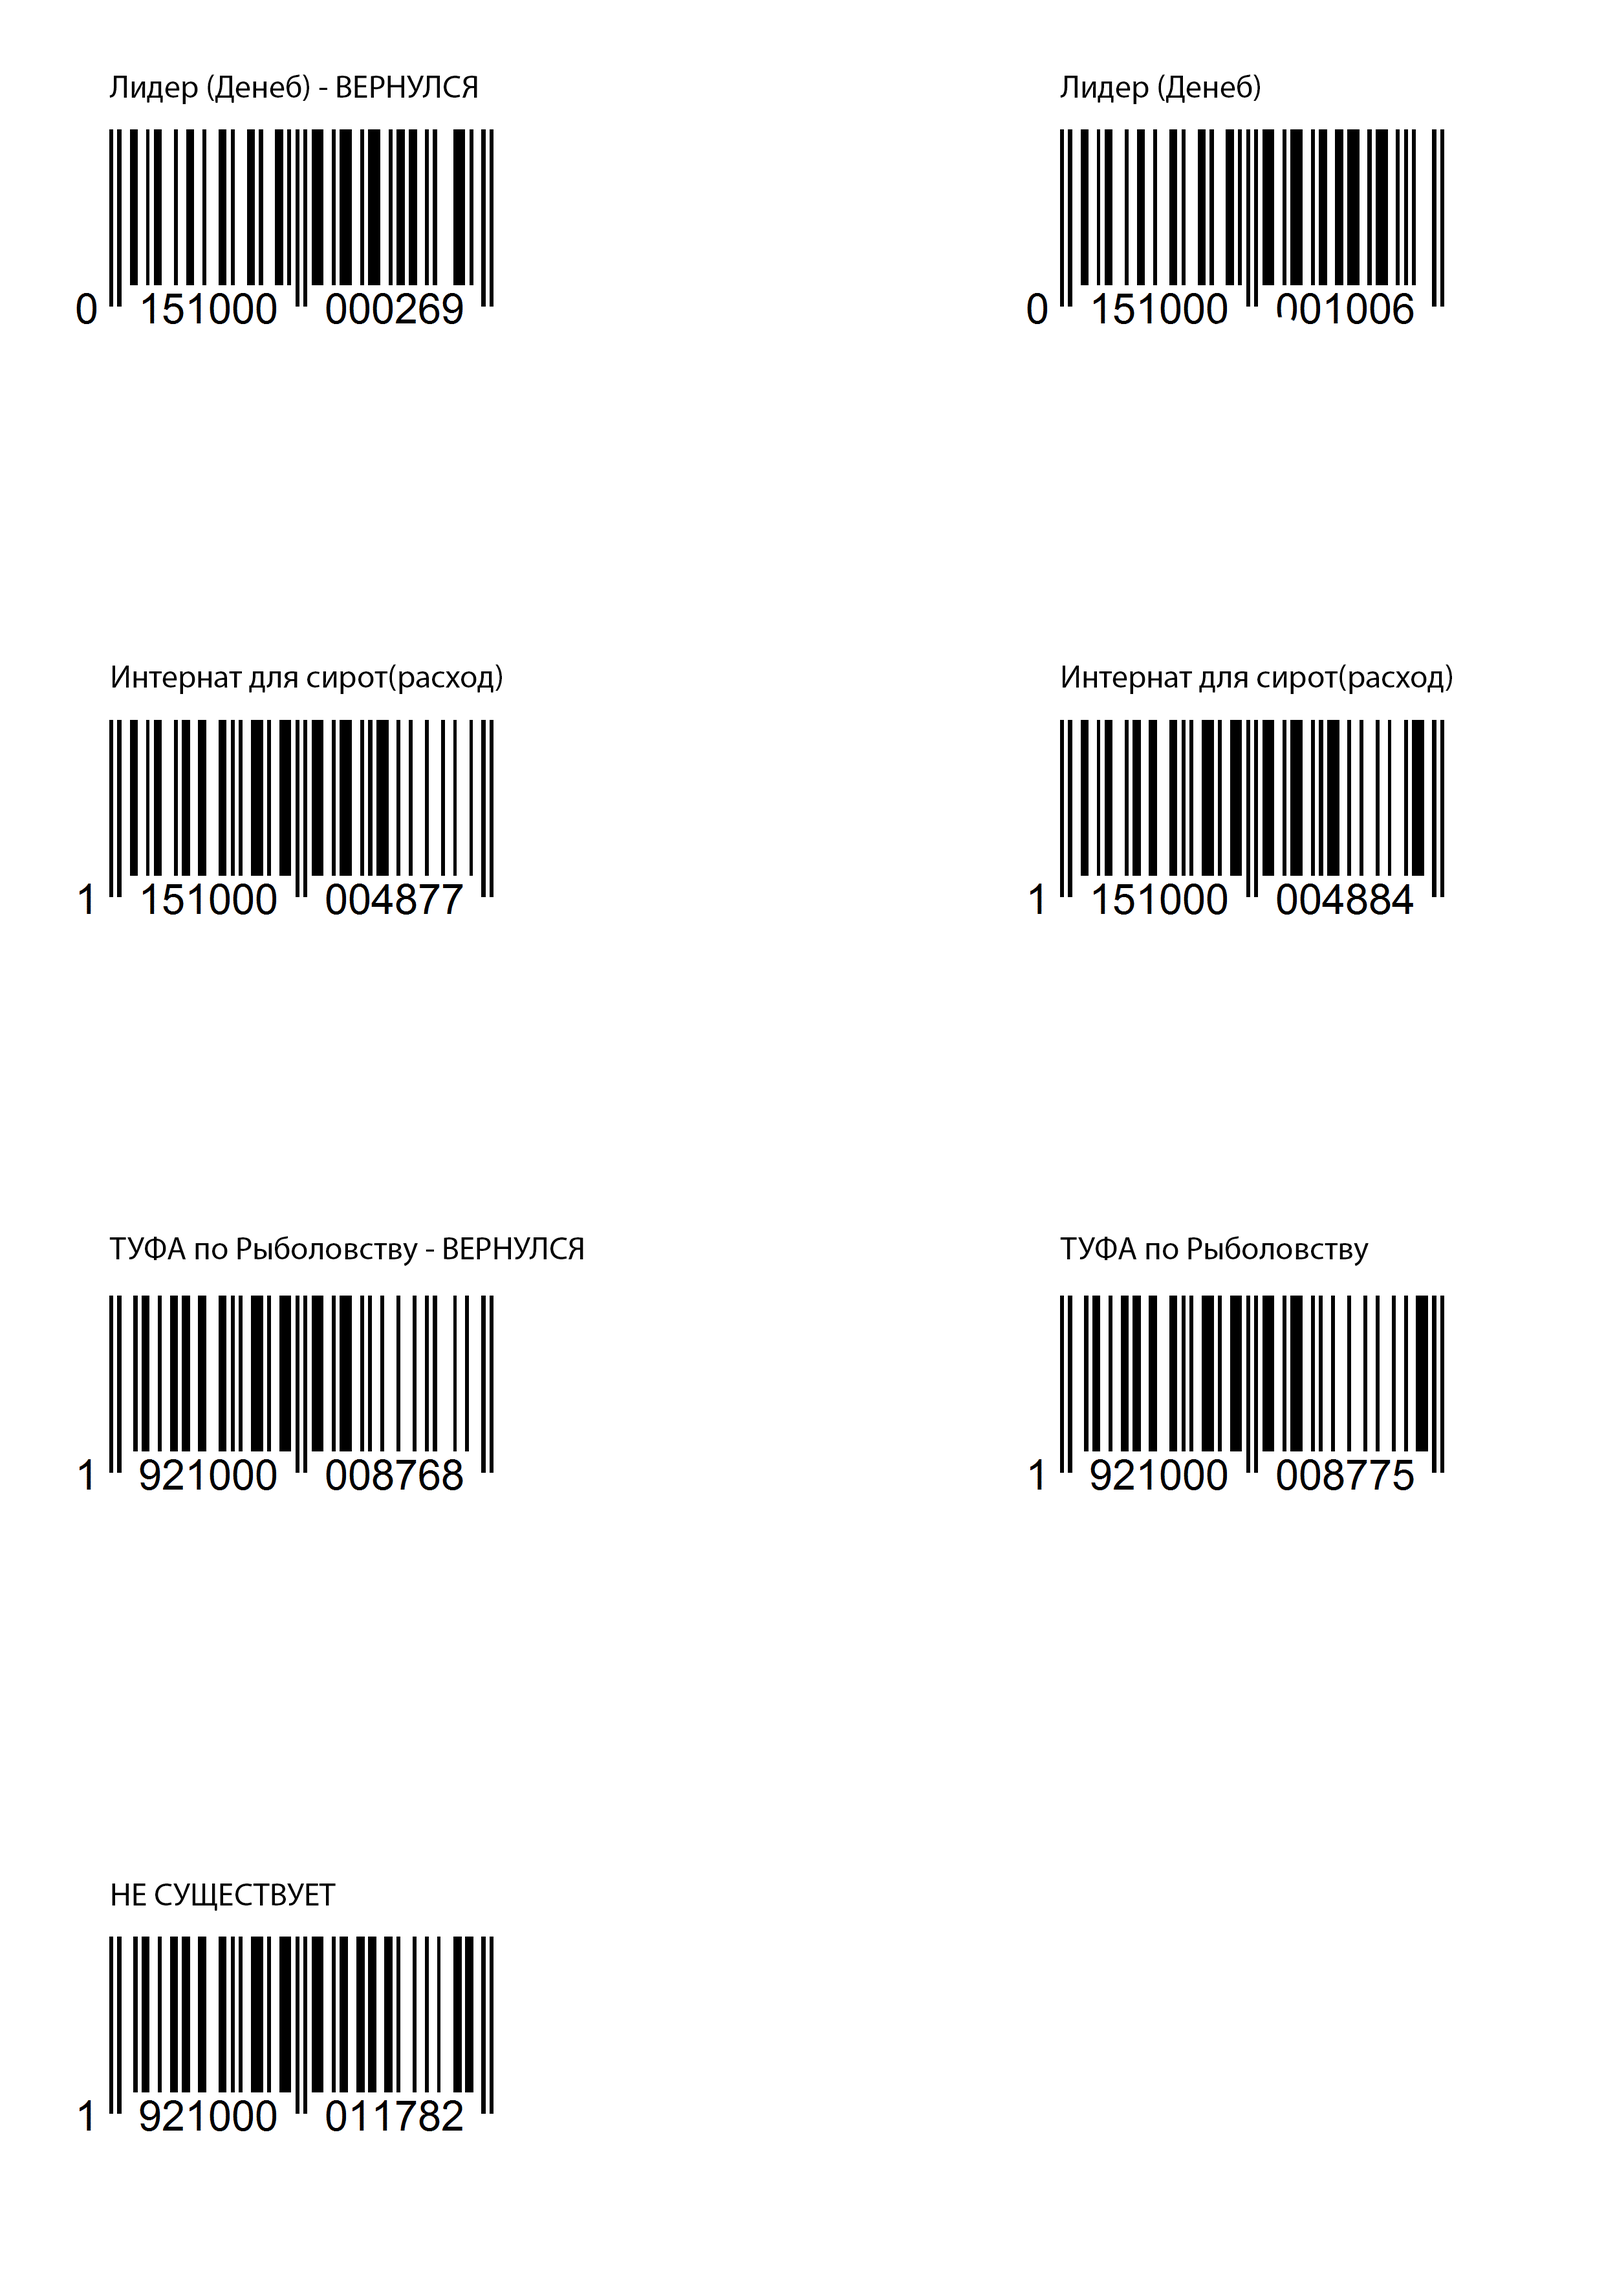
<style>
.page{position:relative;width:1604px;height:2269px;background:#ffffff}
.page>*{position:absolute;margin:0}
.t1{font:7.8px "MyriadPro-Regular";color:#000000}
</style>
<div class="page">
<p class="t1" style="left:109px;top:74px;width:368px;height:30px">Лидер (Денеб) - ВЕРНУЛСЯ</p>
<p class="t1" style="left:1060px;top:74px;width:200px;height:30px">Лидер (Денеб)</p>
<p class="t1" style="left:113px;top:664px;width:389px;height:30px">Интернат для сирот(расход)</p>
<p class="t1" style="left:1062px;top:664px;width:390px;height:30px">Интернат для сирот(расход)</p>
<p class="t1" style="left:109px;top:1236px;width:474px;height:30px">ТУФА по Рыболовству - ВЕРНУЛСЯ</p>
<p class="t1" style="left:1060px;top:1236px;width:308px;height:30px">ТУФА по Рыболовству</p>
<p class="t1" style="left:112px;top:1883px;width:224px;height:27px">НЕ СУЩЕСТВУЕТ</p>
</div>
